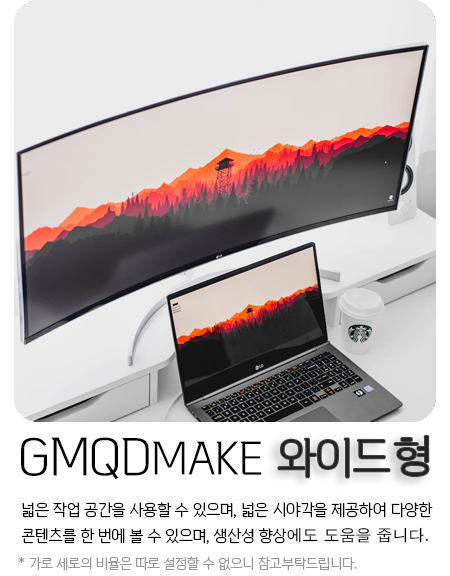
<style>
.page{position:relative;width:450px;height:576px;background:#ffffff}
.page>*{position:absolute;margin:0}
.t1{font:50px "VITRO-PRIDE-OTF";color:#000000}
.t2{font:45px "VITRO-PRIDE-OTF";color:#000000}
.t3{font:43.9px "VITRO-PRIDE-OTF";color:#222222}
.t4{font:43.9px "AppleGothic";color:#222222}
.t5{font:16px/24px "VITRO-PRIDE-OTF";color:#000000}
.t6{font:16px/24px "AppleGothic";color:#000000}
.t7{font:14px "VITRO-PRIDE-OTF";color:#969696}
</style>
<div class="page">
<p class="t1" style="left:21px;top:437px;width:241px;height:43px">GMQD<span class="t2">MAKE</span></p>
<p class="t3" style="left:278px;top:436px;width:151px;height:42px">와이드<span class="t4">형</span></p>
<p class="t5" style="left:21px;top:502px;width:412px;height:43px">넓은 작업 공간을 사용할 수 있으며, 넓은 시야각을 제공하여 다양한 <br>콘텐츠를 한 번에 볼 수 있으며, 생산성 향상<span class="t6">에도 도움을 줍니다.</span></p>
<p class="t7" style="left:18px;top:556px;width:339px;height:15px">* 가로 세로의 비율은 따로 설정할 수 없으니 참고부탁드립니다.</p>
</div>
